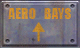
<style>
.page{position:relative;width:80px;height:48px}
.page>*{position:absolute;margin:0}
.t1{font:14px "Impact";letter-spacing:0.02em;color:#db9a29;scale:0.95 1}
</style>
<div class="page">
<p class="t1" style="left:8px;top:8px;width:63px;height:11px">AERO   BAYS</p>
</div>
